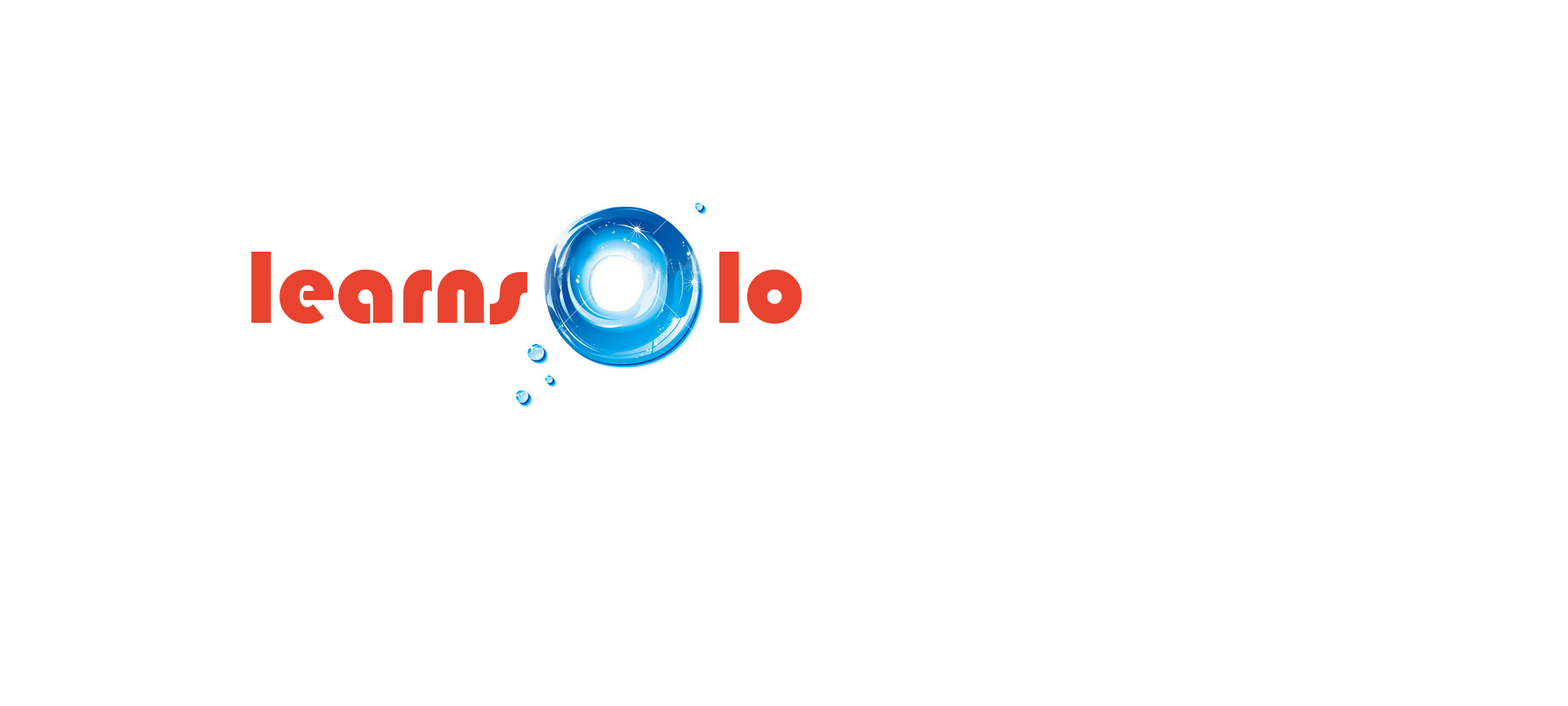
<style>
.page{position:relative;width:1568px;height:706px;background:#ffffff}
.page>*{position:absolute;margin:0}
.t1{font:106.2px "Bauhaus93";color:#e8432e}
</style>
<div class="page">
<p class="t1" style="left:251px;top:252px;width:551px;height:72px">learns       lo</p>
</div>
